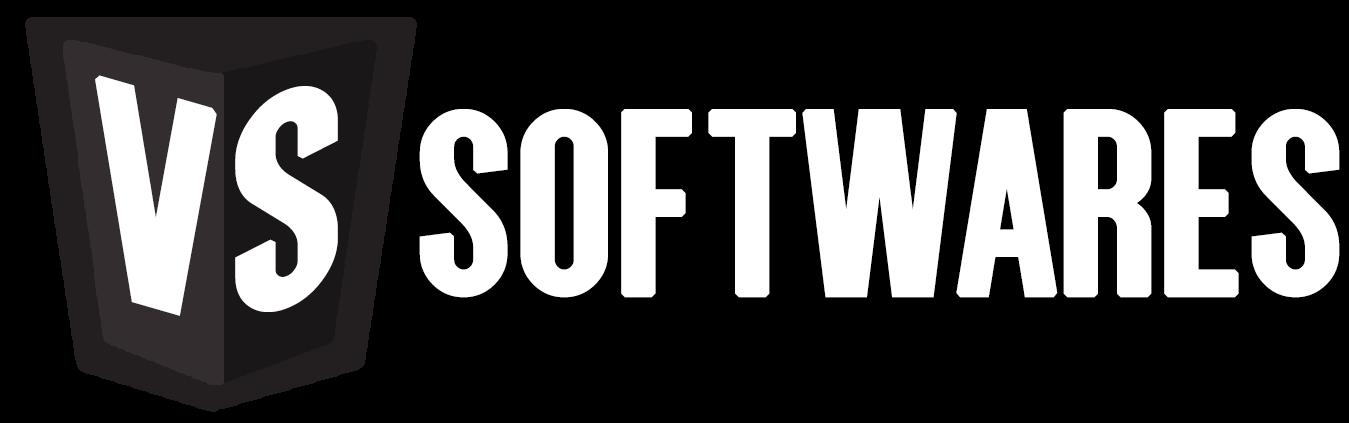
<style>
.page{position:relative;width:1349px;height:423px;background:#000000}
.page>*{position:absolute;margin:0}
.t1{font:316.1px "AlegreSans-Regular";letter-spacing:-0.075em;color:#ffffff;font-weight:bold;scale:1.08 1}
.t2{font:318.1px "AlegreSans-Regular";letter-spacing:-0.075em;color:#ffffff;font-weight:bold;scale:1.08 1}
.t3{font:274.2px "AlegreSans-Regular";color:#ffffff;font-weight:bold}
</style>
<div class="page">
<p class="t1" style="left:95px;top:75px;width:122px;height:241px;rotate:16deg">V</p>
<p class="t2" style="left:235px;top:86px;width:103px;height:226px;rotate:-21deg">S</p>
<p class="t3" style="left:419px;top:109px;width:921px;height:189px">SOFTWARES</p>
</div>
